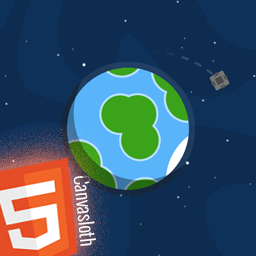
<style>
.page{position:relative;width:256px;height:256px;background:#0e2c50}
.page>*{position:absolute;margin:0}
.t1{font:18.7px "Oswald-Light";color:#ffffff}
</style>
<div class="page">
<p class="t1" style="left:73px;top:175px;width:23px;height:71px;rotate:84deg">Canvasloth</p>
</div>
